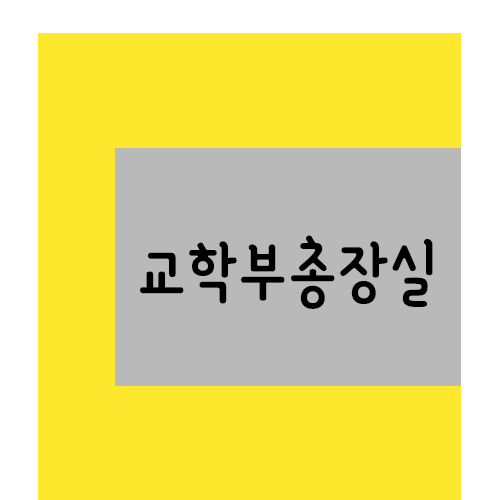
<style>
.page{position:relative;width:500px;height:500px;background:#fee82d}
.page>*{position:absolute;margin:0}
.t1{font:80px "YanoljaYacheR";color:#000000}
</style>
<div class="page">
<p class="t1" style="left:140px;top:235px;width:293px;height:74px">교학부총장실</p>
</div>
